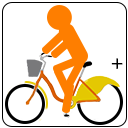
<style>
.page{position:relative;width:128px;height:128px;background:#ffffff}
.page>*{position:absolute;margin:0}
.t1{font:18px "AdobeFanHeitiStd-Bold";color:#000000}
</style>
<div class="page">
<p class="t1" style="left:111px;top:58px;width:12px;height:11px;rotate:180deg">+</p>
</div>
